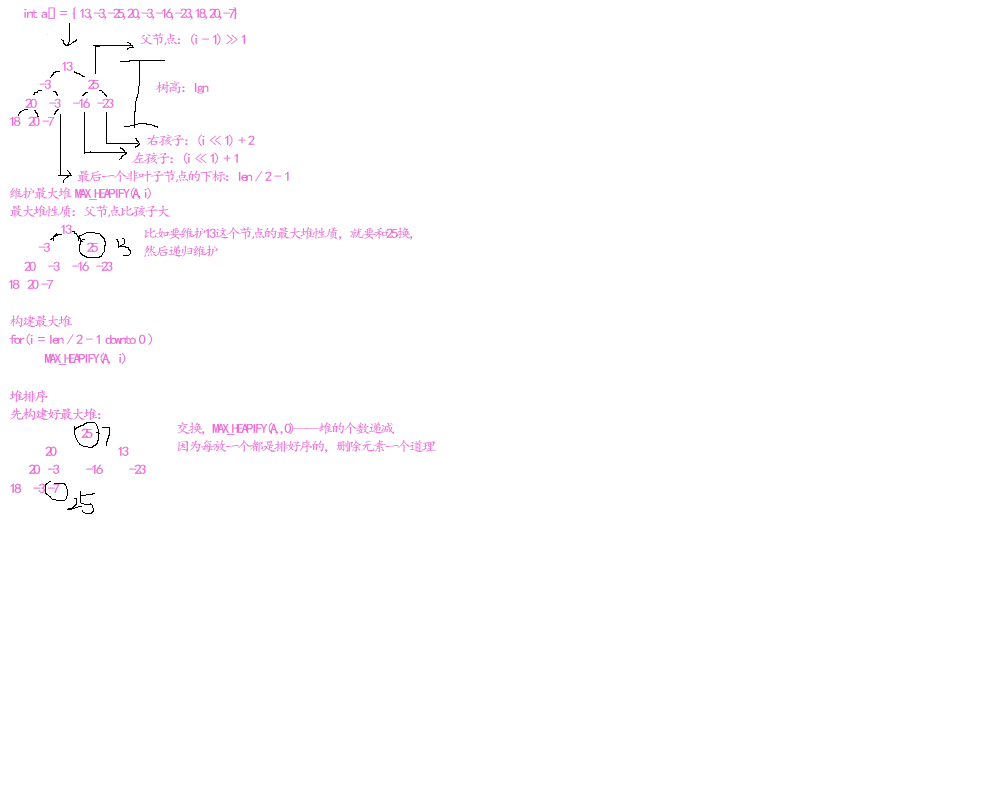
<style>
.page{position:relative;width:1000px;height:800px;background:#ffffff}
.page>*{position:absolute;margin:0}
.t1{font:13.3px "¿¬Ìå";letter-spacing:-0.18em;color:#ec6cd8;scale:1.12 1}
.t2{font:13.3px/14px "¿¬Ìå";letter-spacing:-0.18em;color:#ec6cd8;scale:1.12 1}
</style>
<div class="page">
<p class="t1" style="left:24px;top:7px;width:213px;height:13px">int a[] = { 13,-3,-25,20,-3,-16,-23,18,20,-7}</p>
<p class="t1" style="left:140px;top:33px;width:106px;height:13px">父节点：(i - 1) &gt;&gt; 1</p>
<p class="t2" style="left:9px;top:61px;width:105px;height:65px">13<br>    -3        25<br> 20   -3   -16  -23<br>    18  20 -7</p>
<p class="t1" style="left:155px;top:81px;width:54px;height:13px">树高：lgn</p>
<p class="t1" style="left:147px;top:134px;width:108px;height:12px">右孩子：(i &lt;&lt; 1) + 2</p>
<p class="t1" style="left:132px;top:152px;width:106px;height:12px">左孩子：(i &lt;&lt; 1) + 1</p>
<p class="t1" style="left:77px;top:170px;width:212px;height:13px">最后一个非叶子节点的下标：len / 2 - 1</p>
<p class="t2" style="left:10px;top:187px;width:160px;height:31px">维护最大堆 MAX_HEAPIFY(A,i)<br>最大堆性质：父节点比孩子大</p>
<p class="t2" style="left:8px;top:224px;width:105px;height:65px">13<br>    -3        25<br> 20   -3   -16  -23<br>    18  20 -7</p>
<p class="t2" style="left:144px;top:227px;width:269px;height:30px">比如要维护13这个节点的最大堆性质，就要和25换，<br>然后递归维护</p>
<p class="t2" style="left:9px;top:315px;width:144px;height:50px">构建最大堆<br>for(i = len / 2 - 1 downto 0 ) <br> MAX_HEAPIFY(A, i)</p>
<p class="t2" style="left:177px;top:422px;width:259px;height:31px">交换，MAX_HEAPIFY(A,,0)——堆的个数递减<br>因为每放一个都是排好序的，删除元素一个道理</p>
</div>
